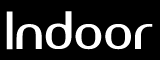
<style>
.page{position:relative;width:160px;height:60px;background:#000000}
.page>*{position:absolute;margin:0}
.t1{font:50px "AmerikaSans";color:#ffffff}
</style>
<div class="page">
<p class="t1" style="left:6px;top:11px;width:147px;height:39px">Indoor</p>
</div>
